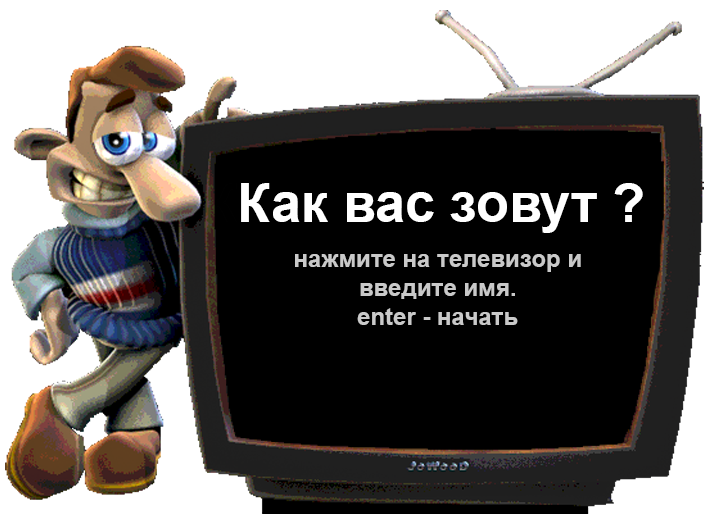
<style>
.page{position:relative;width:709px;height:516px;background:#000000}
.page>*{position:absolute;margin:0}
.t1{font:53.8px "Arial-BoldMT";color:#ffffff}
.t2{font:53.8px "Arial-BoldMT";color:#000000}
.t3{font:24px "Arial-BoldMT";color:#c9c9c9}
</style>
<div class="page">
<p class="t1" style="left:208px;top:183px;width:435px;height:50px"><span class="t2">К</span>Как вас зовут ?</p>
<p class="t3" style="left:295px;top:254px;width:286px;height:71px;text-align:center">нажмите на телевизор и введите имя. <br>enter - начать</p>
</div>
